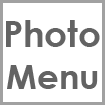
<style>
.page{position:relative;width:105px;height:105px;background:#ffffff}
.page>*{position:absolute;margin:0}
.t1{font:35.6px "CenturyGothic-Bold";color:#636363}
.t2{font:34.4px "CenturyGothic-Bold";color:#636363}
.t3{font:39.4px "CenturyGothic-Bold";color:#636363}
</style>
<div class="page">
<p class="t1" style="left:6px;top:20px;width:94px;height:27px">Photo</p>
<p class="t2" style="left:7px;top:65px;width:91px;height:24px"><span class="t3"> <br></span>Menu</p>
</div>
